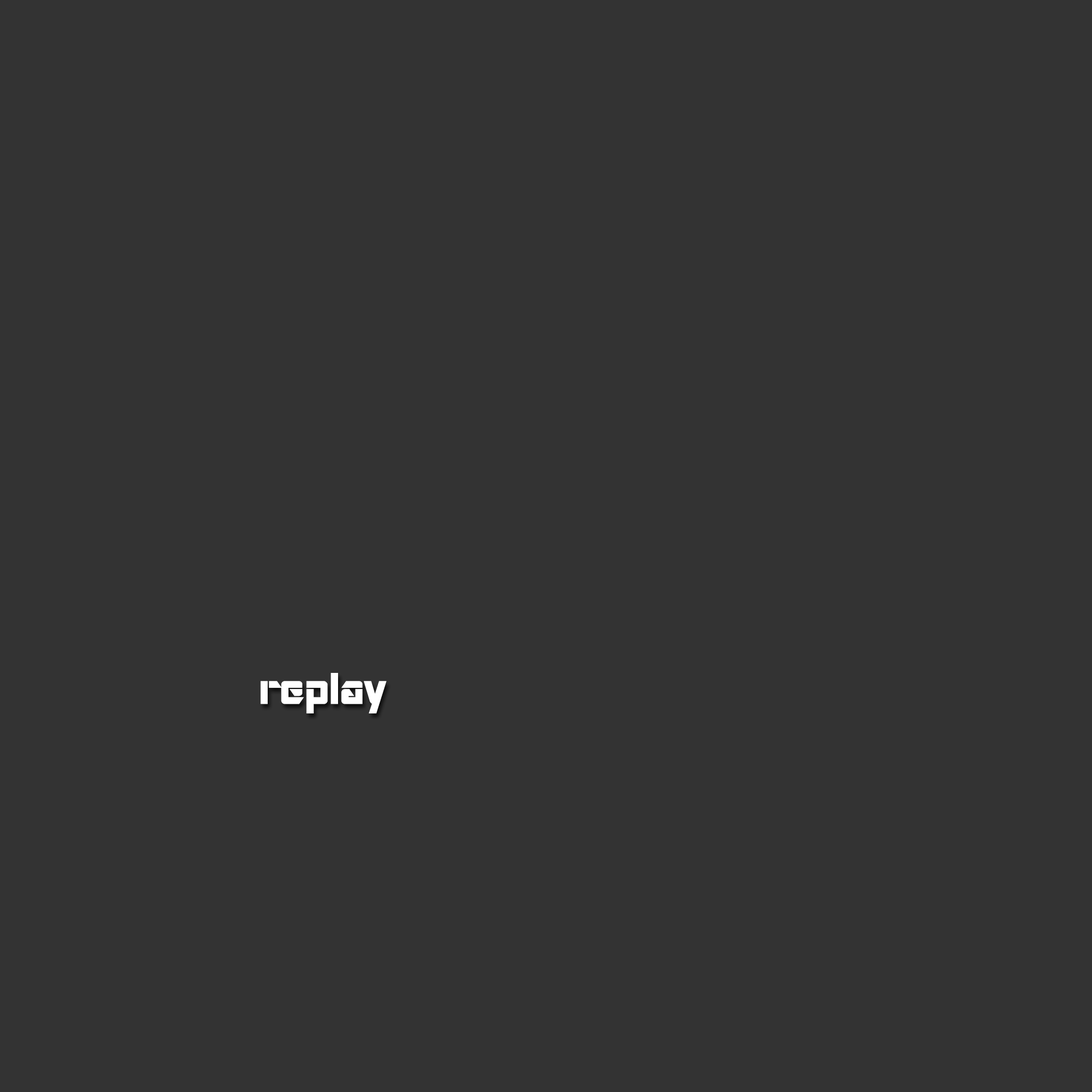
<style>
.page{position:relative;width:1092px;height:1092px;background:#333333}
.page>*{position:absolute;margin:0}
.t1{font:42.7px "ARDESTINE";color:#ffffff;scale:1.04 1}
</style>
<div class="page">
<p class="t1" style="left:260px;top:673px;width:127px;height:40px">replay</p>
</div>
